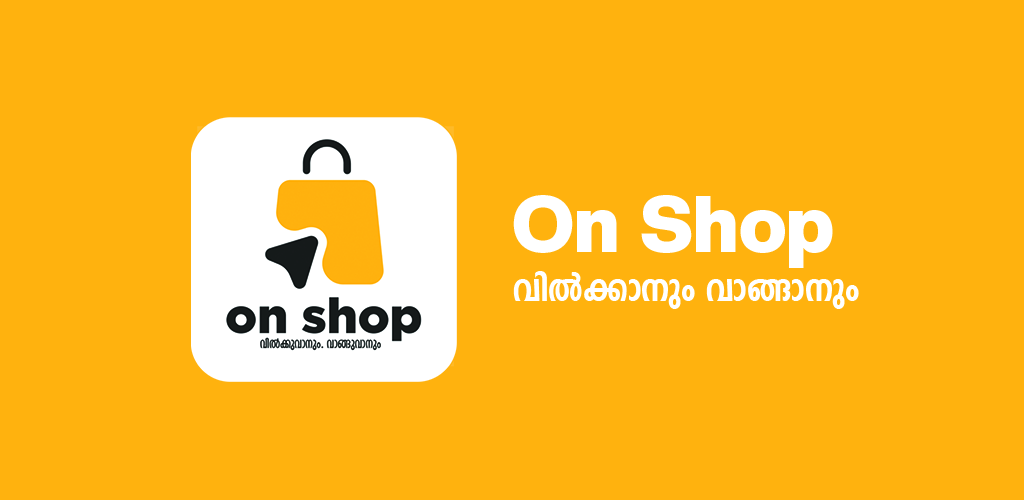
<style>
.page{position:relative;width:1024px;height:500px;background:#ffb20e}
.page>*{position:absolute;margin:0}
.t1{font:79.2px "CreatoDisplay-Black";color:#ffffff}
.t2{font:45.8px "FML-TTIndulekhaHeavy-Bold";color:#ffffff}
</style>
<div class="page">
<p class="t1" style="left:513px;top:195px;width:320px;height:73px">On Shop</p>
<p class="t2" style="left:513px;top:271px;width:346px;height:38px">hn-Â-¡m-\pw- hm-§m-\pw-</p>
</div>
